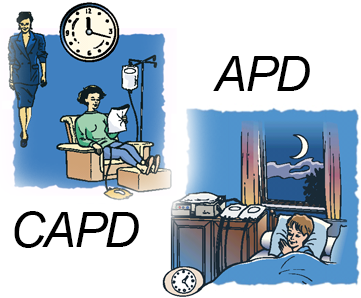
<style>
.page{position:relative;width:361px;height:298px;background:#ffffff}
.page>*{position:absolute;margin:0}
.t1{font:49.1px "Arial-ItalicMT";letter-spacing:-0.05em;color:#000000}
</style>
<div class="page">
<p class="t1" style="left:213px;top:56px;width:97px;height:35px">APD</p>
<p class="t1" style="left:14px;top:211px;width:125px;height:37px">CAPD</p>
</div>
